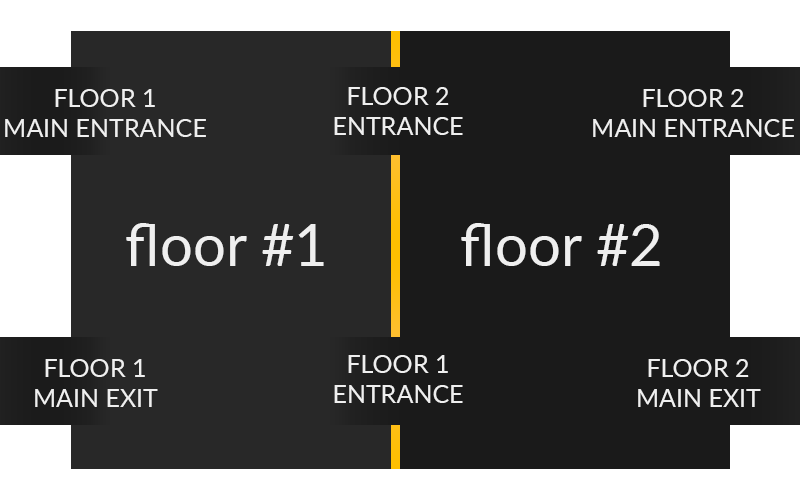
<style>
.page{position:relative;width:800px;height:500px;background:#1a1a1a}
.page>*{position:absolute;margin:0}
.t1{font:25px "Lato-Regular";color:#f0f0f0;text-transform:uppercase}
.t2{font:58.3px "Lato-Regular";color:#f0f0f0}
</style>
<div class="page">
<p class="t1" style="left:5px;top:89px;width:201px;height:48px;text-align:center">floor 1<br>main entrance</p>
<p class="t1" style="left:334px;top:87px;width:129px;height:48px;text-align:center">floor 2<br>entrance</p>
<p class="t1" style="left:593px;top:89px;width:201px;height:48px;text-align:center">floor 2<br>main entrance</p>
<p class="t2" style="left:126px;top:223px;width:198px;height:43px">floor #1</p>
<p class="t2" style="left:461px;top:223px;width:199px;height:43px">floor #2</p>
<p class="t1" style="left:35px;top:359px;width:123px;height:48px;text-align:center">floor 1<br>main eXIT</p>
<p class="t1" style="left:334px;top:355px;width:129px;height:48px;text-align:center">floor 1<br>entrance</p>
<p class="t1" style="left:638px;top:359px;width:123px;height:48px;text-align:center">floor 2<br>main eXIT</p>
</div>
